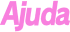
<style>
.page{position:relative;width:70px;height:32px;background:#ffffff}
.page>*{position:absolute;margin:0}
.t1{font:30.7px "RodinPro-EB";letter-spacing:-0.067em;color:#f880de;font-style:italic;scale:0.83 1}
</style>
<div class="page">
<p class="t1" style="left:0px;top:0px;width:71px;height:32px">Ajuda</p>
</div>
